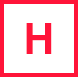
<style>
.page{position:relative;width:78px;height:77px;background:#ffffff}
.page>*{position:absolute;margin:0}
.t1{font:43.6px "NHaasGroteskDSW02-65Md";color:#ff1439}
</style>
<div class="page">
<p class="t1" style="left:26px;top:23px;width:26px;height:31px">H</p>
</div>
